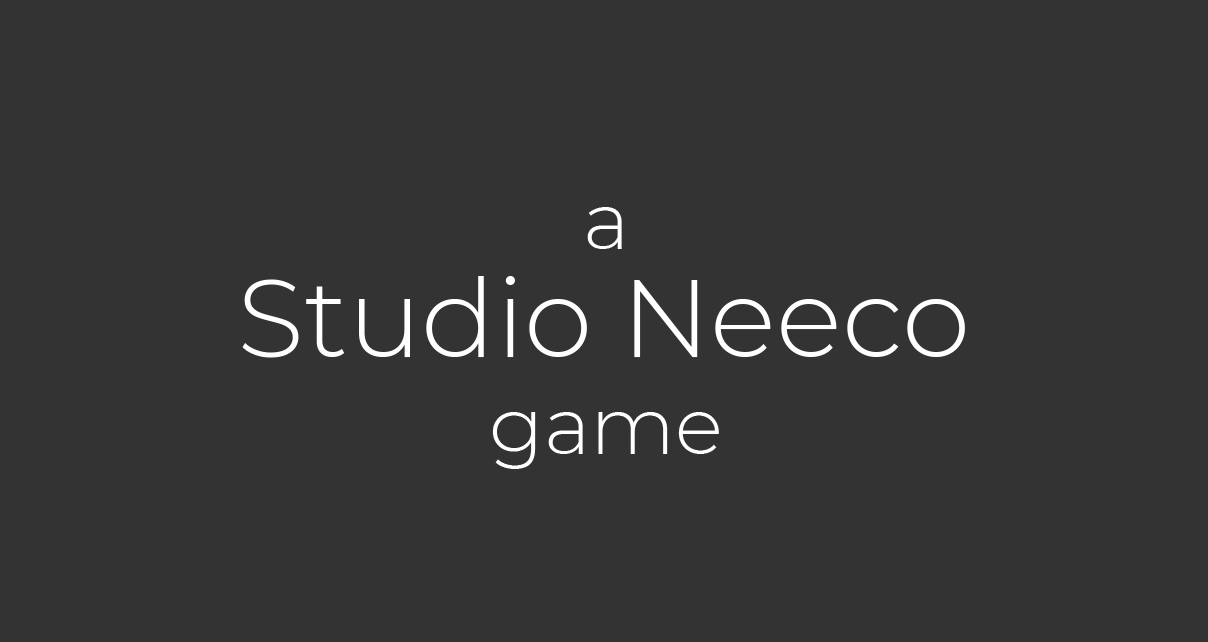
<style>
.page{position:relative;width:1208px;height:642px;background:#333333}
.page>*{position:absolute;margin:0}
.t1{font:80px "Montserrat-Light";color:#ffffff}
.t2{font:110px "Montserrat-Light";color:#ffffff}
</style>
<div class="page">
<p class="t1" style="left:587px;top:207px;width:35px;height:42px">a</p>
<p class="t2" style="left:242px;top:276px;width:723px;height:82px">Studio Neeco</p>
<p class="t1" style="left:492px;top:412px;width:227px;height:57px">game</p>
</div>
